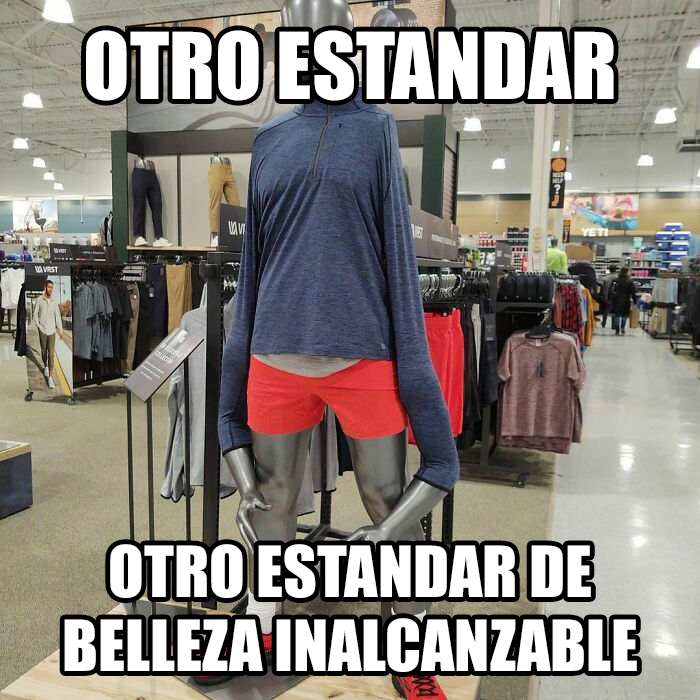
<style>
.page{position:relative;width:700px;height:700px}
.page>*{position:absolute;margin:0}
.t1{font:85.1px "Impact";color:#ffffff}
.t2{font:65.3px "Impact";color:#ffffff}
</style>
<div class="page">
<p class="t1" style="left:86px;top:30px;width:528px;height:71px">OTRO ESTANDAR</p>
<p class="t2" style="left:64px;top:544px;width:573px;height:128px;text-align:center">OTRO ESTANDAR DE<br>BELLEZA INALCANZABLE</p>
</div>
